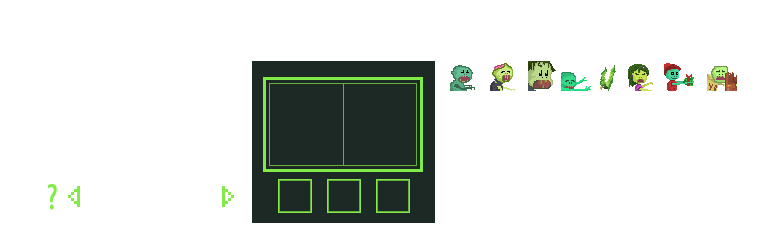
<style>
.page{position:relative;width:779px;height:239px;background:#ffffff}
.page>*{position:absolute;margin:0}
.t1{font:36px "MyriadPro-Regular";letter-spacing:0.075em;color:#83eb48;font-weight:bold;scale:0.69 1}
</style>
<div class="page">
<p class="t1" style="left:47px;top:184px;width:10px;height:26px">?</p>
</div>
